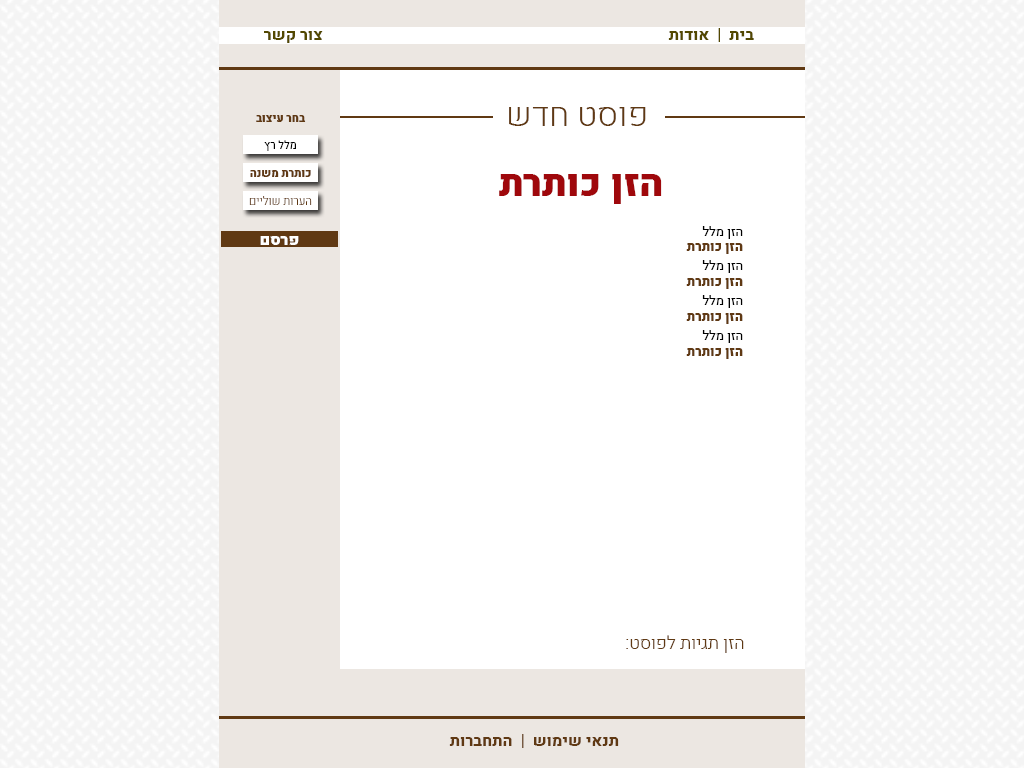
<style>
.page{position:relative;width:1024px;height:768px;background:#ffffff}
.page>*{position:absolute;margin:0}
.t1{font:34px "Heebo-Light";color:#603913}
.t2{font:12px "Heebo-Light";color:#603913;scale:0.96 1}
.t3{font:11.5px "Heebo-Black";color:#603913;scale:0.96 1}
.t4{font:11.5px "Heebo-Regular";color:#000000;scale:0.96 1}
.t5{font:38px "Heebo-Black";color:#9f080c}
.t6{font:13px "Heebo-Black";color:#603913}
.t7{font:13px "Heebo-Regular";color:#000000}
.t8{font:18px "Heebo-Light";color:#603913}
.t9{font:16px "Heebo-ExtraBold";color:#603913}
</style>
<div class="page">
<p class="t1" style="left:509px;top:107px;width:137px;height:19px">פוסט חדש</p>
<p class="t2" style="left:249px;top:115px;width:63px;height:90px;text-align:center"><span class="t3">בחר עיצוב<br><br></span><span class="t4">מלל רץ<br></span><span class="t3"><br>כותרת משנה<br><br></span>הערות שוליים</p>
<p class="t5" style="left:499px;top:174px;width:163px;height:30px">הזן כותרת</p>
<p class="t6" style="left:686px;top:226px;width:57px;height:133px;text-align:justify"><span class="t7">הזן מלל<br></span>הזן כותרת <br><br><span class="t7">הזן מלל<br></span>הזן כותרת <br><br><span class="t7">הזן מלל<br></span>הזן כותרת <br><br><span class="t7">הזן מלל<br></span>הזן כותרת</p>
<p class="t8" style="left:626px;top:635px;width:118px;height:18px">הזן תגיות לפוסט:</p>
<p class="t9" style="left:449px;top:734px;width:170px;height:14px">תנאי שימוש  |  התחברות</p>
</div>
